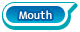
<style>
.page{position:relative;width:80px;height:32px;background:#ffffff}
.page>*{position:absolute;margin:0}
.t1{font:11px "JK-Gothic-M";color:#ffffff}
</style>
<div class="page">
<p class="t1" style="left:19px;top:10px;width:33px;height:9px">Mouth</p>
</div>
